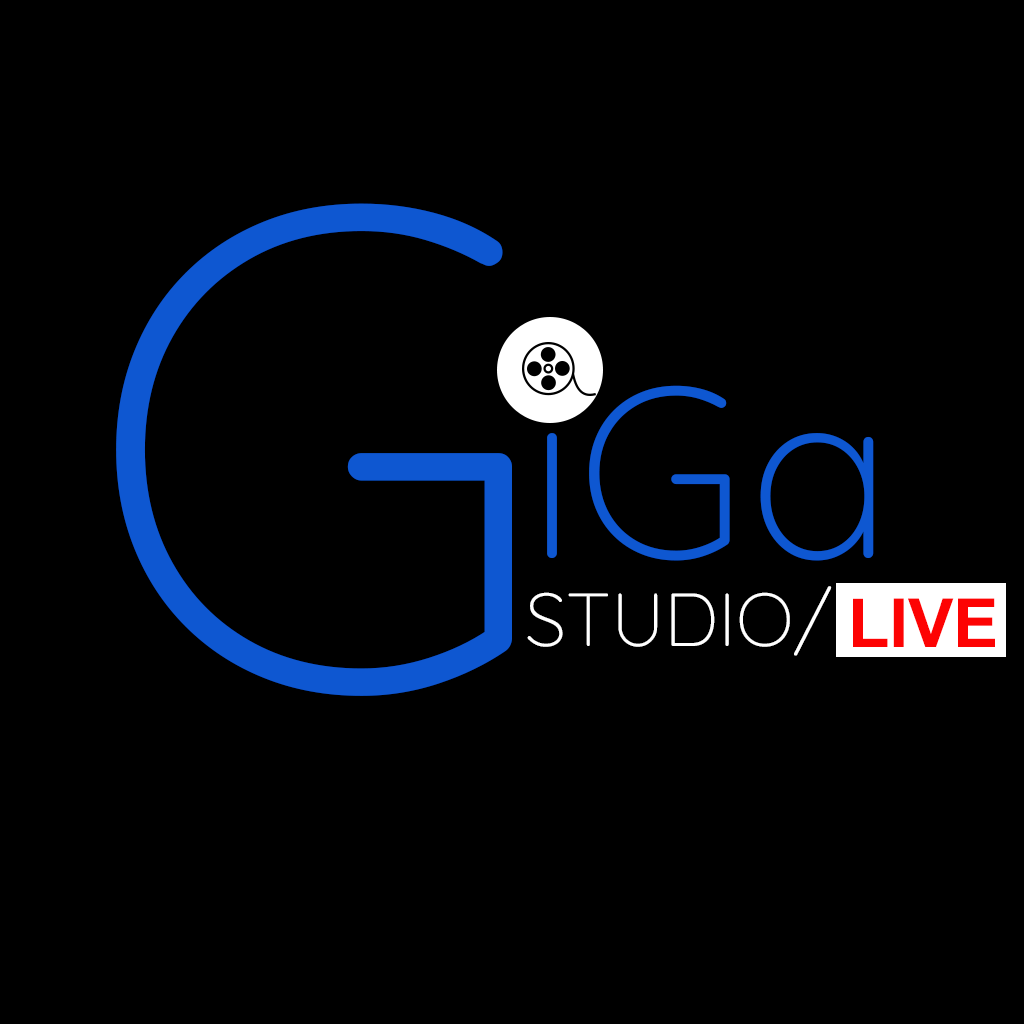
<style>
.page{position:relative;width:1024px;height:1024px;background:#000000}
.page>*{position:absolute;margin:0}
.t1{font:683.6px "Quicksand-Light";color:#0e57d1}
.t2{font:242.5px "Quicksand-Light";color:#0e57d1}
.t3{font:75px "Quicksand-Light";color:#ffffff}
.t4{font:67.6px "Arial-BoldMT";color:#fd0303}
</style>
<div class="page">
<p class="t1" style="left:116px;top:203px;width:396px;height:493px">G</p>
<p class="t2" style="left:543px;top:385px;width:331px;height:176px">iGa</p>
<p class="t3" style="left:527px;top:586px;width:305px;height:70px">STUDIO/</p>
<p class="t4" style="left:853px;top:598px;width:142px;height:49px">LIVE</p>
</div>
